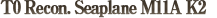
<style>
.page{position:relative;width:217px;height:18px;background:#ffffff}
.page>*{position:absolute;margin:0}
.t1{font:18px "RyuminPro-ExBold";letter-spacing:-0.08em;color:#4a3f32;font-weight:bold;scale:0.9 1}
</style>
<div class="page">
<p class="t1" style="left:0px;top:0px;width:207px;height:18px">T0 Recon. Seaplane M11A K2</p>
</div>
